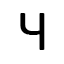
<style>
.page{position:relative;width:64px;height:64px;background:#ffffff}
.page>*{position:absolute;margin:0}
.t1{font:58.3px "Calibri";color:#000000}
</style>
<div class="page">
<p class="t1" style="left:20px;top:13px;width:25px;height:37px">Ч</p>
</div>
